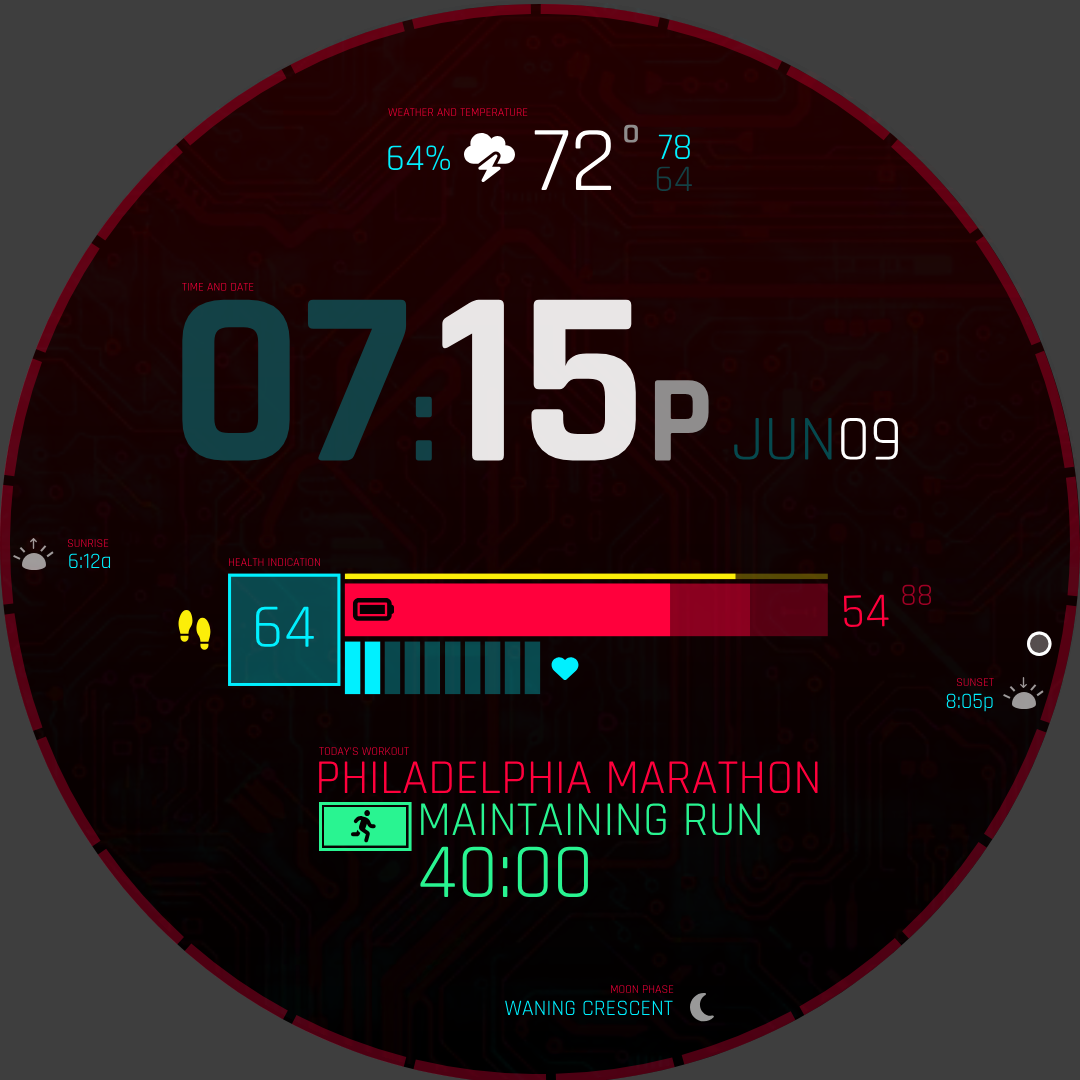
<style>
.page{position:relative;width:1080px;height:1080px;background:#3e3e3e}
.page>*{position:absolute;margin:0}
.t1{font:12px "Rajdhani-Regular"}
.t2{font:92.8px "Rajdhani-Regular";color:#ffffff;scale:1.05 1}
.t3{font:92.8px "Rajdhani-Regular";color:#8f8d8d;scale:1.05 1}
.t4{font:37.9px "Rajdhani-Regular";color:#00f0ff}
.t5{font:37.9px "Rajdhani-Regular";color:#134145}
.t6{font:12px "Rajdhani-Regular";color:#ff003c}
.t7{font:250.3px "Rajdhani-Bold"}
.t8{font:125px "Rajdhani-Bold"}
.t9{font:64.5px "Rajdhani-Regular";color:#06494e}
.t10{font:64.5px "Rajdhani-Regular";color:#ffffff}
.t11{font:22px "Rajdhani-Regular";color:#00f0ff}
.t12{font:31.5px "Rajdhani-Regular";color:#9f0024}
.t13{font:62.4px "Rajdhani-Regular";color:#00f0ff}
.t14{font:48.9px "Rajdhani-Regular";color:#ff003c}
.t15{font:49px "Rajdhani-Regular";color:#ff003c}
.t16{font:49px "Rajdhani-Regular";color:#29f491}
.t17{font:78.3px "Rajdhani-Regular";color:#29f491}
</style>
<div class="page">
<p class="t1" style="left:388px;top:108px;width:140px;height:8px">WEATHER AND TEMPERATURE</p>
<p class="t2" style="left:534px;top:124px;width:104px;height:66px">72<span class="t3">°</span></p>
<p class="t4" style="left:658px;top:134px;width:32px;height:25px">78</p>
<p class="t4" style="left:388px;top:145px;width:62px;height:25px">64%</p>
<p class="t5" style="left:656px;top:166px;width:36px;height:25px">64</p>
<p class="t6" style="left:182px;top:282px;width:72px;height:9px">TIME AND DATE</p>
<p class="t7" style="left:182px;top:299px;width:527px;height:162px">07<span class="t8">:</span>15<span class="t8">P</span></p>
<p class="t9" style="left:734px;top:418px;width:164px;height:42px">JUN<span class="t10">09</span></p>
<p class="t1" style="left:67px;top:539px;width:42px;height:8px">SUNRISE</p>
<p class="t11" style="left:69px;top:553px;width:42px;height:15px">6:12a</p>
<p class="t1" style="left:229px;top:558px;width:91px;height:9px">HEALTH INDICATION</p>
<p class="t12" style="left:902px;top:584px;width:29px;height:21px">88</p>
<p class="t13" style="left:256px;top:606px;width:58px;height:41px">64</p>
<p class="t14" style="left:843px;top:594px;width:46px;height:34px;rotate:-1deg">54</p>
<p class="t1" style="left:957px;top:678px;width:37px;height:8px">SUNSET</p>
<p class="t11" style="left:946px;top:693px;width:47px;height:19px">8:05p</p>
<p class="t1" style="left:319px;top:747px;width:90px;height:8px">TODAY'S WORKOUT</p>
<p class="t15" style="left:319px;top:761px;width:499px;height:32px">PHILADELPHIA MARATHON</p>
<p class="t16" style="left:421px;top:803px;width:339px;height:32px">MAINTAINING RUN</p>
<p class="t17" style="left:420px;top:846px;width:168px;height:52px">40:00</p>
<p class="t1" style="left:611px;top:985px;width:63px;height:8px">MOON PHASE</p>
<p class="t11" style="left:505px;top:1000px;width:168px;height:15px">WANING CRESCENT</p>
</div>
